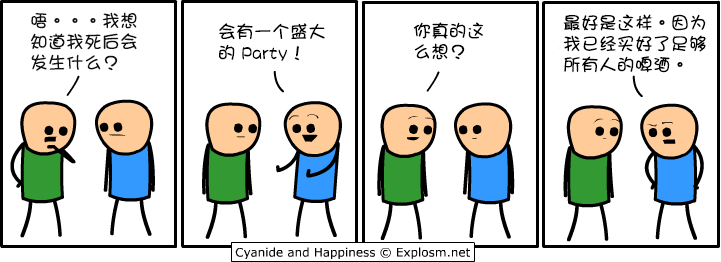
<style>
.page{position:relative;width:721px;height:262px;background:#ffffff}
.page>*{position:absolute;margin:0}
.t1{font:18px/21px "DFGirl";color:#101010}
.t2{font:18px/21px "DFGirl";color:#000000}
</style>
<div class="page">
<p class="t1" style="left:31px;top:12px;width:106px;height:59px">唔。。。我想<br>知道我死后会<br>发生什么？</p>
<p class="t2" style="left:563px;top:14px;width:143px;height:59px">最好是这样。因为<br>我已经买好了足够<br>所有人的啤酒。</p>
<p class="t2" style="left:219px;top:23px;width:106px;height:38px">会有一个盛大<br>的 Party！</p>
<p class="t2" style="left:413px;top:22px;width:71px;height:38px">你真的这<br>么想？</p>
</div>
